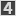
<style>
.page{position:relative;width:16px;height:16px;background:#d9d9d9}
.page>*{position:absolute;margin:0}
.t1{font:20px "NoyhBold";color:#d9d9d9}
</style>
<div class="page">
<p class="t1" style="left:3px;top:2px;width:10px;height:12px">4</p>
</div>
